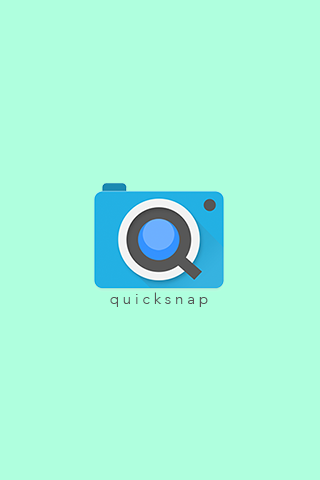
<style>
.page{position:relative;width:320px;height:480px;background:#afffde}
.page>*{position:absolute;margin:0}
.t1{font:15px "Avenir-Light";color:#575757}
</style>
<div class="page">
<p class="t1" style="left:110px;top:292px;width:98px;height:15px">q u i c k s n a p</p>
</div>
